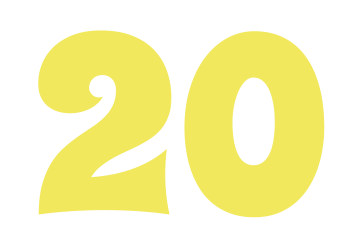
<style>
.page{position:relative;width:354px;height:236px;background:#ffffff}
.page>*{position:absolute;margin:0}
.t1{font:250px "SpicyRice-Regular";color:#f2e85e}
</style>
<div class="page">
<p class="t1" style="left:38px;top:30px;width:287px;height:188px">20</p>
</div>
